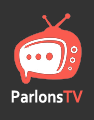
<style>
.page{position:relative;width:94px;height:120px;background:#333333}
.page>*{position:absolute;margin:0}
.t1{font:18px "Corbel-Bold";color:#ffffff;scale:0.9 1}
.t2{font:18px "Corbel-Bold";color:#fa5b4f;scale:0.9 1}
</style>
<div class="page">
<p class="t1" style="left:11px;top:89px;width:72px;height:14px">Parlons<span class="t2">TV</span></p>
</div>
